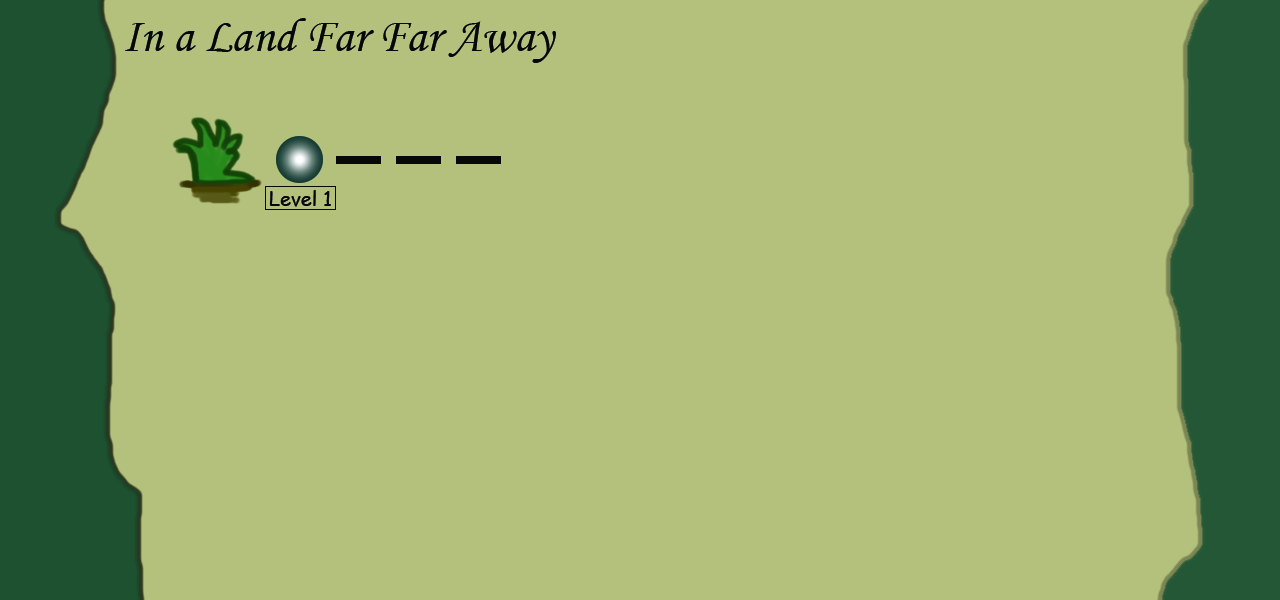
<style>
.page{position:relative;width:1280px;height:600px;background:#b4c17c}
.page>*{position:absolute;margin:0}
.t1{font:48px "MonotypeCorsiva";color:#060808}
.t2{font:20px "ComicSansMS";color:#060808}
</style>
<div class="page">
<p class="t1" style="left:125px;top:18px;width:431px;height:45px">In a Land Far Far Away</p>
<p class="t2" style="left:269px;top:190px;width:62px;height:17px">Level 1</p>
</div>
